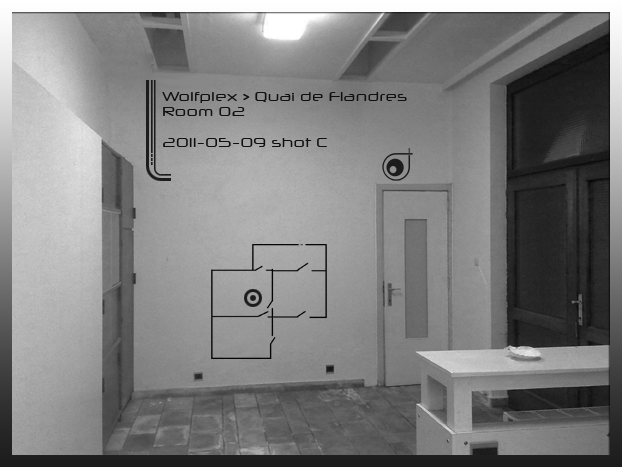
<style>
.page{position:relative;width:622px;height:467px}
.page>*{position:absolute;margin:0}
.t1{font:13px "NeuropolXFree";color:#101010}
</style>
<div class="page">
<p class="t1" style="left:162px;top:92px;width:245px;height:55px">Wolfplex &gt; Quai de Flandres<br>Room 02<br><br>2011-05-09 shot C</p>
</div>
